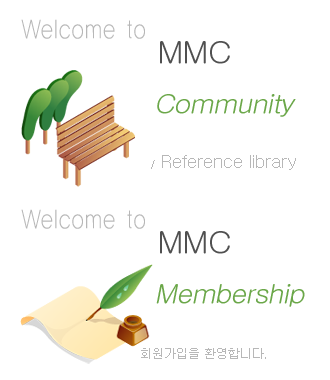
<style>
.page{position:relative;width:330px;height:380px;background:#ffffff}
.page>*{position:absolute;margin:0}
.t1{font:28px "YDIYGO110-KSCPC-EUC-H";letter-spacing:-0.025em;color:#b7b7b7;scale:0.85 1}
.t2{font:30px "Gulim";letter-spacing:-0.05em;color:#505050;scale:1.1 1}
.t3{font:26px "Gulim";letter-spacing:-0.05em;color:#6ba749;font-style:italic;scale:1.1 1}
.t4{font:18px "Gulim";color:#b7b7b7}
.t5{font:10px "Gulim";color:#b7b7b7}
.t6{font:12px "Gulim";color:#b7b7b7}
</style>
<div class="page">
<p class="t1" style="left:21px;top:19px;width:124px;height:20px">Welcome to</p>
<p class="t2" style="left:160px;top:41px;width:70px;height:23px">MMC</p>
<p class="t3" style="left:157px;top:94px;width:139px;height:23px">Community</p>
<p class="t4" style="left:151px;top:155px;width:145px;height:15px"><span class="t5">/</span> Reference library</p>
<p class="t1" style="left:21px;top:209px;width:124px;height:20px">Welcome to</p>
<p class="t2" style="left:160px;top:231px;width:70px;height:23px">MMC</p>
<p class="t3" style="left:156px;top:284px;width:149px;height:23px">Membership</p>
<p class="t6" style="left:141px;top:348px;width:125px;height:11px">회원가입을 환영합니다.</p>
</div>
